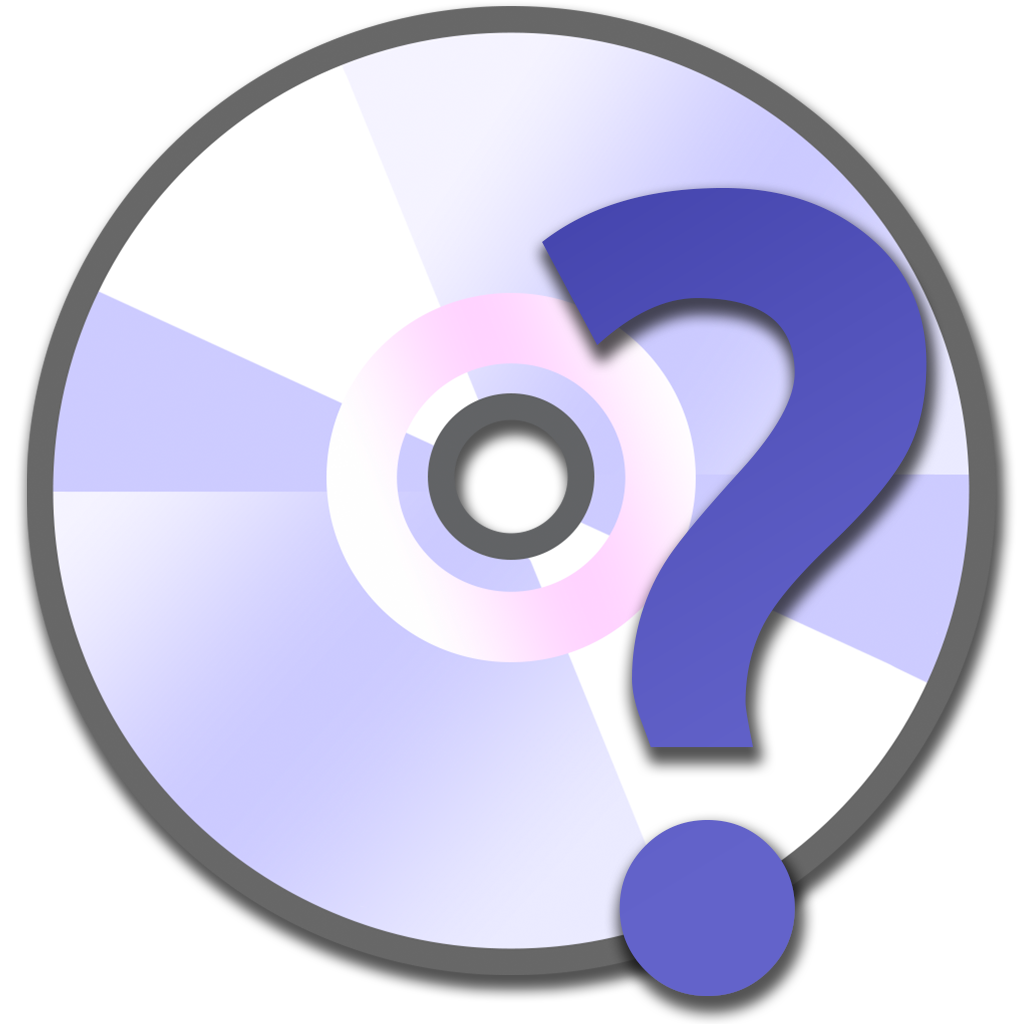
<style>
.page{position:relative;width:1024px;height:1024px;background:#ffffff}
.page>*{position:absolute;margin:0}
.t1{font:1095.9px "TrebuchetMS-Bold";letter-spacing:-0.025em;color:#6363c9}
</style>
<div class="page">
<p class="t1" style="left:542px;top:188px;width:385px;height:808px">?</p>
</div>
